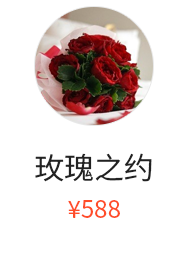
<style>
.page{position:relative;width:188px;height:266px;background:#ffffff}
.page>*{position:absolute;margin:0}
.t1{font:30px "SourceHanSansCN-Regular";color:#222222}
.t2{font:24px "SourceHanSansCN-Regular";color:#ff4d29}
</style>
<div class="page">
<p class="t1" style="left:35px;top:153px;width:117px;height:29px">玫瑰之约</p>
<p class="t2" style="left:68px;top:200px;width:52px;height:18px">¥588</p>
</div>
